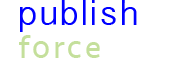
<style>
.page{position:relative;width:170px;height:58px;background:#ffffff}
.page>*{position:absolute;margin:0}
.t1{font:33.3px/33.3px "SinhalaSangamMN";letter-spacing:0.075em;color:#0000ff}
.t2{font:33.3px/33.3px "Seravek";letter-spacing:0.075em;color:#c4df9b}
</style>
<div class="page">
<p class="t1" style="left:19px;top:0px;width:118px;height:58px">publish<br><span class="t2">force</span></p>
</div>
